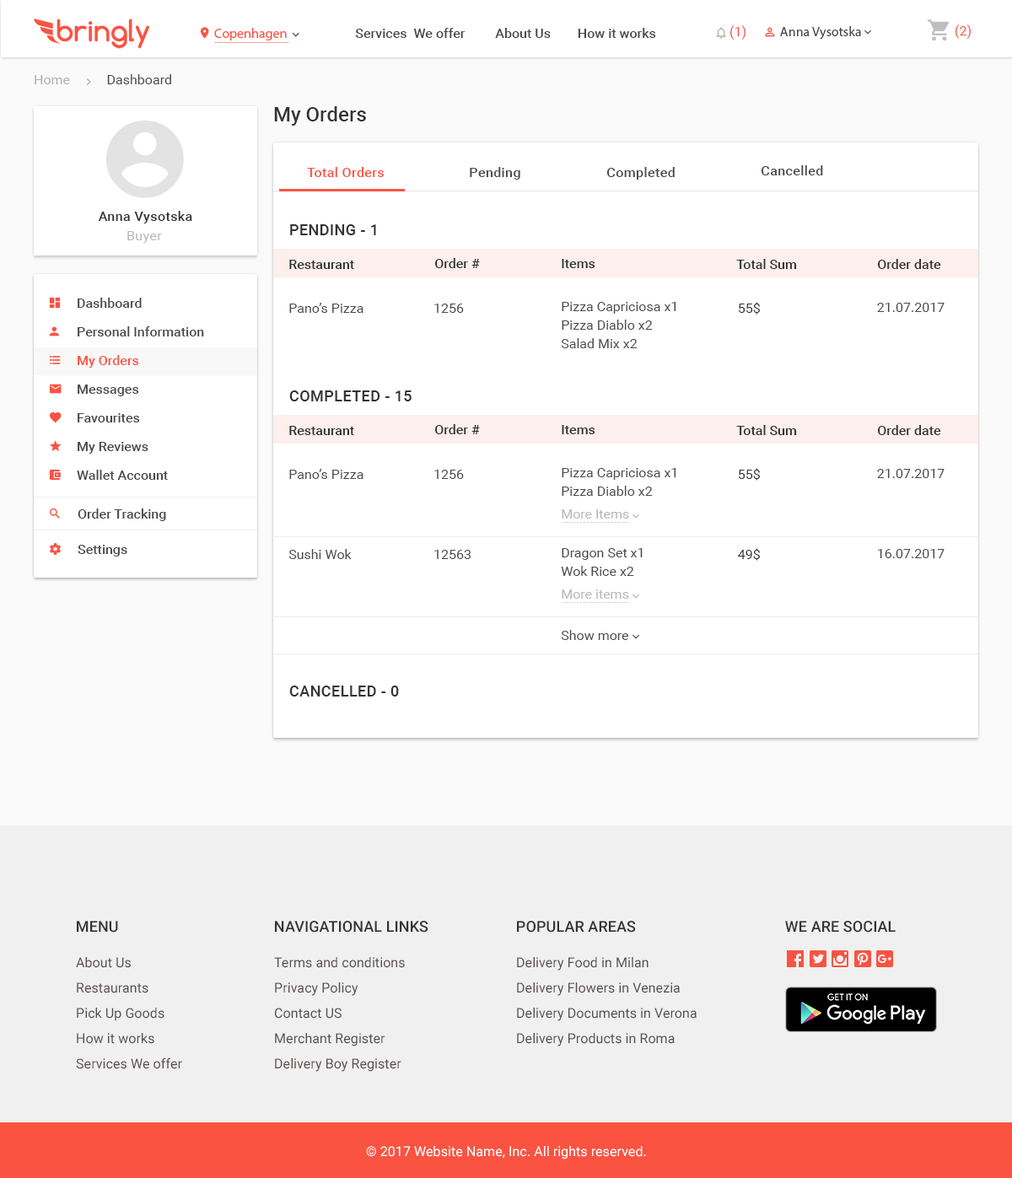
<style>
.page{position:relative;width:1012px;height:1178px;background:#ffffff}
.page>*{position:absolute;margin:0}
.t1{font:13.5px "MyriadPro-Regular";color:#fa5342}
.t2{font:13.5px "Roboto-Medium";color:#4a4a4a}
.t3{font:13.5px "Roboto-Regular";color:#fa5342}
.t4{font:13.5px "MyriadPro-Regular";color:#4a4a4a}
.t5{font:13.5px "Roboto-Regular";color:#4a4a4a}
.t6{font:13.5px "Roboto-Regular";color:#b0b0b0}
.t7{font:20.2px "Roboto-Medium";color:#333333}
.t8{font:13.5px "Roboto-Medium";letter-spacing:0.025em;color:#fa5342}
.t9{font:13.5px "Roboto-Medium";letter-spacing:0.025em;color:#4a4a4a}
.t10{font:13.5px "Roboto-Medium";letter-spacing:0.025em;color:#333333}
.t11{font:13.5px "Roboto-Regular";letter-spacing:0.025em;color:#b8b8b8}
.t12{font:15.2px "Roboto-Medium";letter-spacing:0.025em;color:#333333;text-transform:uppercase}
.t13{font:13.5px "Roboto-Medium";color:#333333}
.t14{font:13.5px/28.7px "Roboto-Medium";color:#4a4a4a}
.t15{font:13.5px/28.7px "Roboto-Medium";color:#fa5342}
.t16{font:13.5px/18.6px "Roboto-Regular";color:#4a4a4a}
.t17{font:13.5px "Roboto-Regular";color:#333333}
.t18{font:13.5px "Roboto-Regular";color:#b8b8b8}
.t19{font:15.2px "Roboto-Medium";letter-spacing:0.005em;color:#333333}
.t20{font:15.2px "Roboto-Medium";letter-spacing:0.005em;color:#333333;text-transform:uppercase}
.t21{font:13.5px/25.3px "Roboto-Regular";letter-spacing:0.005em;color:#554c4a}
.t22{font:13.5px "Roboto-Regular";letter-spacing:0.005em;color:#ffffff}
</style>
<div class="page">
<p class="t1" style="left:214px;top:28px;width:73px;height:12px">Copenhagen</p>
<p class="t2" style="left:355px;top:28px;width:301px;height:10px">Services  We offer         About Us        How it works</p>
<p class="t3" style="left:730px;top:25px;width:16px;height:15px">(1)</p>
<p class="t4" style="left:780px;top:26px;width:81px;height:14px">Anna Vysotska</p>
<p class="t3" style="left:955px;top:24px;width:16px;height:15px">(2)</p>
<p class="t5" style="left:35px;top:74px;width:136px;height:10px"><span class="t6">Home           </span>Dashboard</p>
<p class="t7" style="left:274px;top:106px;width:92px;height:20px">My Orders</p>
<p class="t8" style="left:307px;top:167px;width:77px;height:10px">Total Orders</p>
<p class="t9" style="left:470px;top:167px;width:50px;height:13px">Pending</p>
<p class="t9" style="left:606px;top:167px;width:69px;height:13px">Completed</p>
<p class="t9" style="left:761px;top:165px;width:62px;height:10px">Cancelled</p>
<p class="t10" style="left:98px;top:211px;width:94px;height:12px">Anna Vysotska</p>
<p class="t11" style="left:127px;top:231px;width:35px;height:12px">Buyer</p>
<p class="t12" style="left:290px;top:224px;width:86px;height:11px">Pending - 1</p>
<p class="t13" style="left:289px;top:260px;width:65px;height:9px">Restaurant</p>
<p class="t13" style="left:434px;top:258px;width:46px;height:10px">Order #</p>
<p class="t13" style="left:562px;top:259px;width:33px;height:9px">Items</p>
<p class="t13" style="left:736px;top:259px;width:61px;height:10px">Total Sum</p>
<p class="t13" style="left:877px;top:259px;width:64px;height:10px">Order date</p>
<p class="t14" style="left:77px;top:298px;width:127px;height:182px">Dashboard<br>Personal Information<br><span class="t15">My Orders<br></span>Messages<br>Favourites<br>My Reviews<br>Wallet Account</p>
<p class="t5" style="left:289px;top:303px;width:75px;height:10px">Pano’s Pizza</p>
<p class="t5" style="left:434px;top:304px;width:30px;height:9px">1256</p>
<p class="t16" style="left:561px;top:302px;width:115px;height:46px">Pizza Capriciosa x1<br>Pizza Diablo x2<br>Salad Mix x2</p>
<p class="t17" style="left:739px;top:302px;width:21px;height:13px">55$</p>
<p class="t5" style="left:877px;top:303px;width:68px;height:9px">21.07.2017</p>
<p class="t12" style="left:289px;top:390px;width:123px;height:11px">COmpleted - 15</p>
<p class="t13" style="left:289px;top:426px;width:65px;height:9px">Restaurant</p>
<p class="t13" style="left:434px;top:424px;width:46px;height:10px">Order #</p>
<p class="t13" style="left:562px;top:425px;width:33px;height:9px">Items</p>
<p class="t13" style="left:736px;top:425px;width:61px;height:10px">Total Sum</p>
<p class="t13" style="left:877px;top:425px;width:64px;height:10px">Order date</p>
<p class="t5" style="left:289px;top:469px;width:75px;height:10px">Pano’s Pizza</p>
<p class="t5" style="left:434px;top:470px;width:30px;height:9px">1256</p>
<p class="t16" style="left:562px;top:468px;width:114px;height:28px">Pizza Capriciosa x1<br>Pizza Diablo x2</p>
<p class="t17" style="left:739px;top:468px;width:21px;height:13px">55$</p>
<p class="t5" style="left:877px;top:469px;width:68px;height:9px">21.07.2017</p>
<p class="t2" style="left:78px;top:509px;width:88px;height:12px">Order Tracking</p>
<p class="t18" style="left:562px;top:509px;width:67px;height:10px">More Items</p>
<p class="t2" style="left:78px;top:545px;width:49px;height:12px">Settings</p>
<p class="t5" style="left:288px;top:549px;width:64px;height:10px">Sushi Wok</p>
<p class="t5" style="left:434px;top:550px;width:37px;height:9px">12563</p>
<p class="t16" style="left:561px;top:548px;width:82px;height:28px">Dragon Set x1<br>Wok Rice x2</p>
<p class="t17" style="left:738px;top:548px;width:22px;height:13px">49$</p>
<p class="t5" style="left:878px;top:549px;width:67px;height:9px">16.07.2017</p>
<p class="t18" style="left:562px;top:590px;width:67px;height:9px">More items</p>
<p class="t5" style="left:561px;top:630px;width:67px;height:10px">Show more</p>
<p class="t12" style="left:289px;top:686px;width:110px;height:11px">Cancelled - 0</p>
<p class="t19" style="left:77px;top:921px;width:41px;height:12px">MENU</p>
<p class="t20" style="left:275px;top:921px;width:153px;height:12px">Navigational Links</p>
<p class="t20" style="left:517px;top:921px;width:119px;height:12px">Popular Areas</p>
<p class="t20" style="left:785px;top:921px;width:111px;height:12px">We are social</p>
<p class="t21" style="left:76px;top:957px;width:106px;height:112px">About Us<br>Restaurants<br>Pick Up Goods <br>How it works <br>Services We offer</p>
<p class="t21" style="left:274px;top:957px;width:131px;height:115px">Terms and conditions<br>Privacy Policy<br>Contact US <br>Merchant Register <br>Delivery Boy Register</p>
<p class="t21" style="left:517px;top:957px;width:180px;height:90px">Delivery Food in Milan<br>Delivery Flowers in Venezia<br>Delivery Documents in Verona<br>Delivery Products in Roma</p>
<p class="t22" style="left:366px;top:1146px;width:280px;height:14px">© 2017 Website Name, Inc. All rights reserved.</p>
</div>
